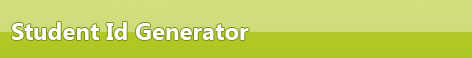
<style>
.page{position:relative;width:472px;height:58px}
.page>*{position:absolute;margin:0}
.t1{font:24px "SegoeUI-Bold";color:#fefefe}
</style>
<div class="page">
<p class="t1" style="left:12px;top:22px;width:237px;height:18px">Student Id Generator</p>
</div>
